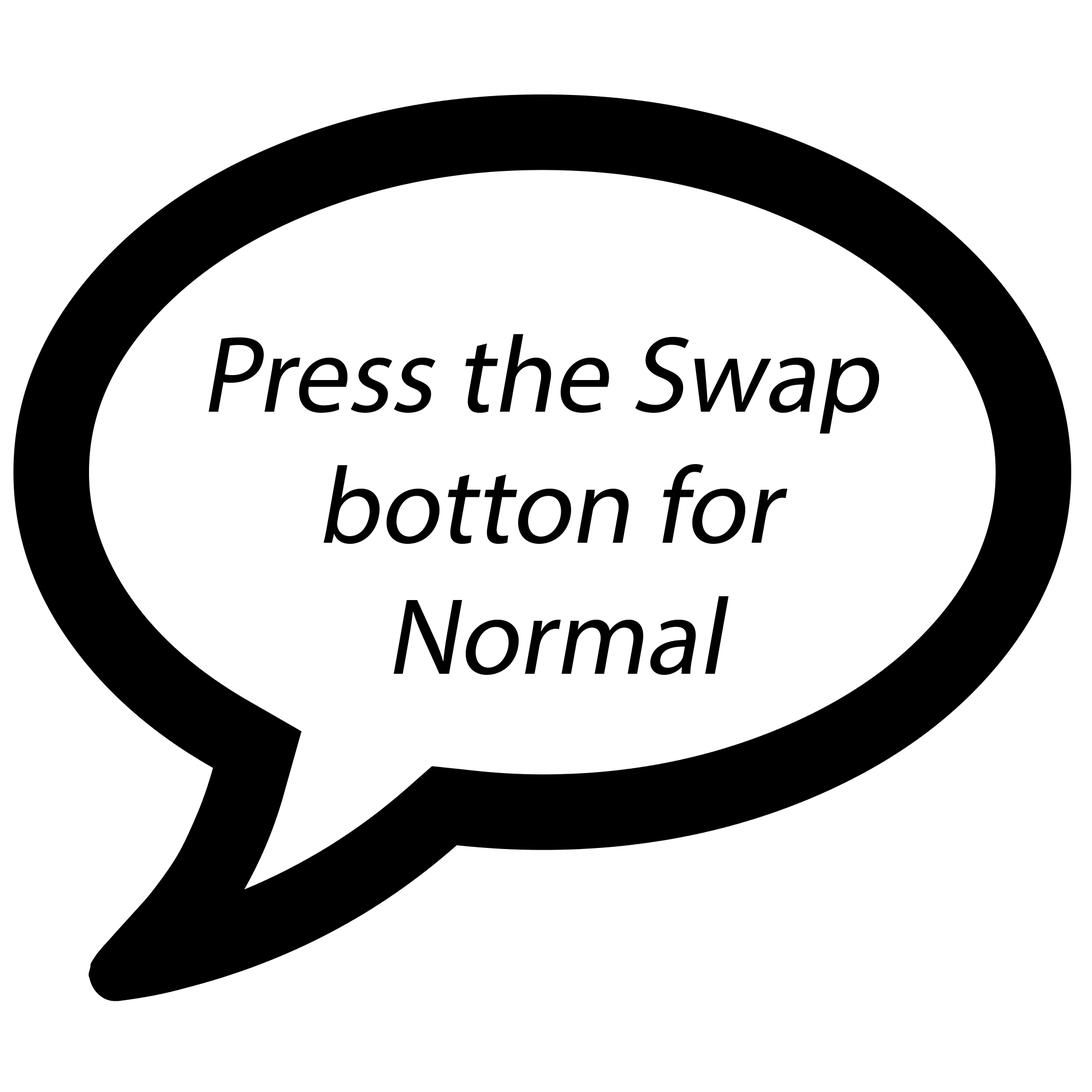
<style>
.page{position:relative;width:1092px;height:1092px;background:#ffffff}
.page>*{position:absolute;margin:0}
.t1{font:109.2px "MyriadPro-Regular";color:#000000;font-style:italic}
</style>
<div class="page">
<p class="t1" style="left:209px;top:334px;width:671px;height:341px">Press the Swap <br>       botton for <br>          Normal</p>
</div>
